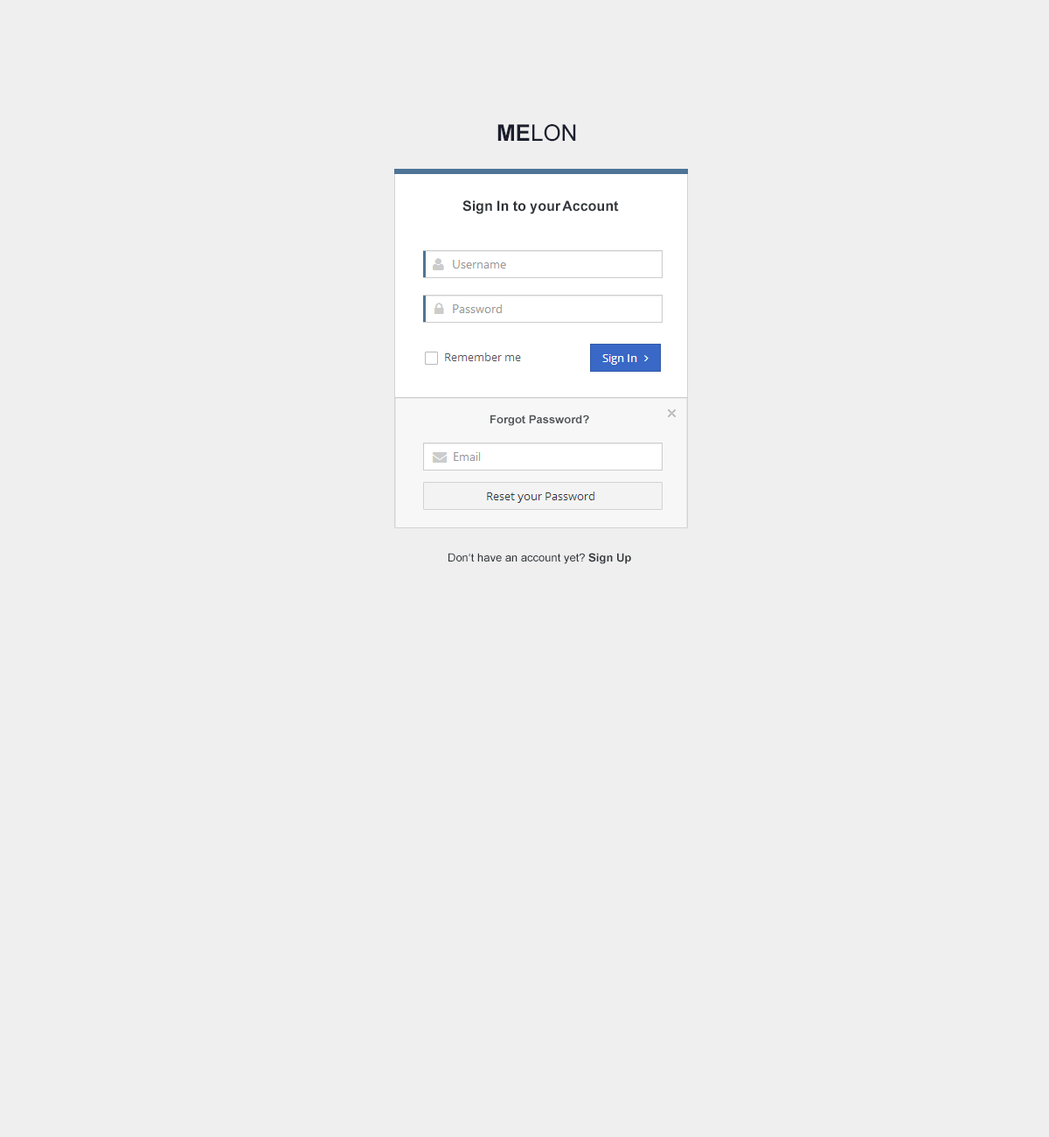
<style>
.page{position:relative;width:1049px;height:1137px;background:#efefef}
.page>*{position:absolute;margin:0}
.t1{font:22.7px "ArialMT";color:#1b1f2d}
.t2{font:22.7px "Arial-BoldMT";color:#1b1f2d}
.t3{font:14px "Arial-BoldMT";color:#303539}
.t4{font:11.4px "Arial-BoldMT";color:#4f5355}
.t5{font:11.4px "ArialMT";color:#303539}
.t6{font:11.4px "Arial-BoldMT";color:#303539}
</style>
<div class="page">
<p class="t1" style="left:497px;top:124px;width:79px;height:18px"><span class="t2">ME</span>LON</p>
<p class="t3" style="left:462px;top:200px;width:157px;height:14px">Sign In to your Account</p>
<p class="t4" style="left:490px;top:414px;width:99px;height:12px">Forgot Password?</p>
<p class="t5" style="left:449px;top:553px;width:182px;height:11px">Don‘t have an account yet?<span class="t6"> Sign Up</span></p>
</div>
